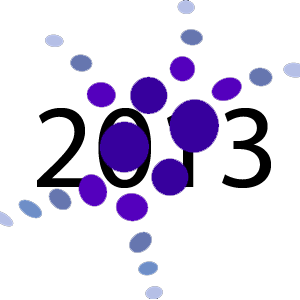
<style>
.page{position:relative;width:300px;height:300px;background:#ffffff}
.page>*{position:absolute;margin:0}
.t1{font:120px "MyriadPro-Regular";color:#000000}
</style>
<div class="page">
<p class="t1" style="left:37px;top:108px;width:234px;height:80px">2013</p>
</div>
